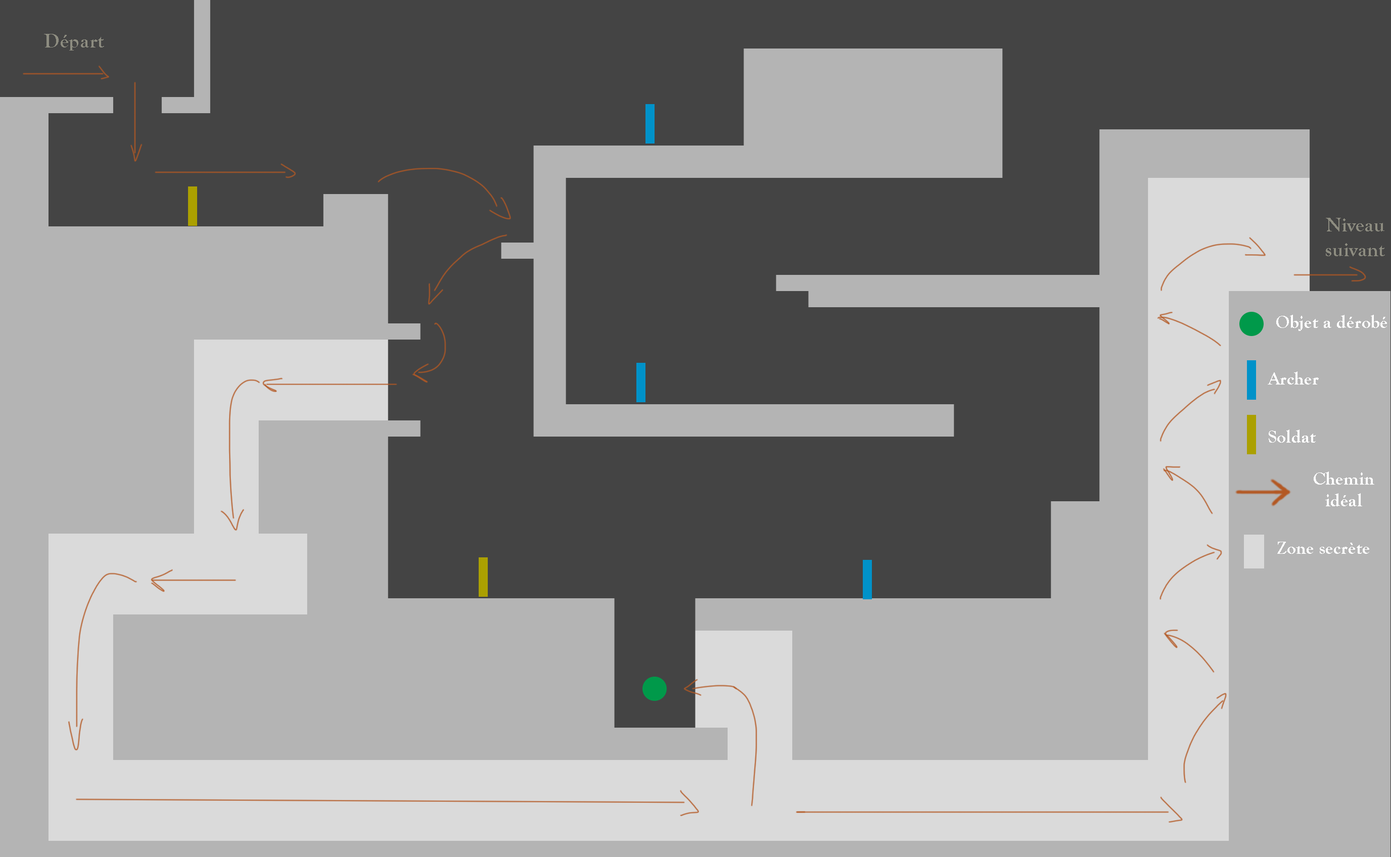
<style>
.page{position:relative;width:1391px;height:857px;background:#444444}
.page>*{position:absolute;margin:0}
.t1{font:20.4px "GoudyOldStyleT-Bold";color:#8d8c80}
.t2{font:18.3px "GoudyOldStyleT-Bold";color:#ffffff}
</style>
<div class="page">
<p class="t1" style="left:44px;top:34px;width:60px;height:17px">Départ</p>
<p class="t1" style="left:1326px;top:218px;width:59px;height:38px;text-align:center">Niveau suivant</p>
<p class="t2" style="left:1276px;top:315px;width:111px;height:16px">Objet a dérobé</p>
<p class="t2" style="left:1268px;top:372px;width:51px;height:13px">Archer</p>
<p class="t2" style="left:1269px;top:430px;width:47px;height:13px">Soldat</p>
<p class="t2" style="left:1314px;top:472px;width:60px;height:34px;text-align:center">Chemin<br>idéal</p>
<p class="t2" style="left:1277px;top:542px;width:92px;height:12px">Zone secrète</p>
</div>
